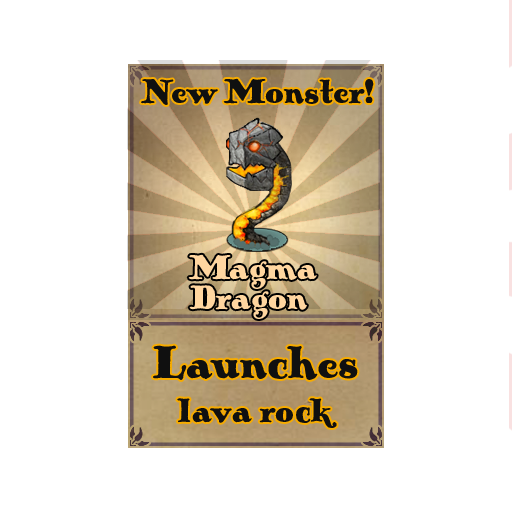
<style>
.page{position:relative;width:512px;height:512px;background:#ffffff}
.page>*{position:absolute;margin:0}
.t1{font:36px "PickworthOldStylePro";color:#101010}
.t2{font:36px/30px "PickworthOldStylePro";color:#ffd6a0}
.t3{font:48px "PickworthOldStylePro";color:#101010}
</style>
<div class="page">
<p class="t1" style="left:141px;top:78px;width:233px;height:27px">New Monster!</p>
<p class="t2" style="left:188px;top:254px;width:129px;height:65px">Magma <br>Dragon</p>
<p class="t1" style="left:153px;top:345px;width:205px;height:83px;text-align:center"><span class="t3">Launches <br></span>lava rock</p>
</div>
